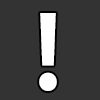
<style>
.page{position:relative;width:100px;height:100px;background:#333333}
.page>*{position:absolute;margin:0}
.t1{font:100px "AdobeGothicStd-Bold";color:#ffffff;text-transform:uppercase}
</style>
<div class="page">
<p class="t1" style="left:39px;top:13px;width:18px;height:78px">!</p>
</div>
